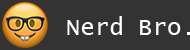
<style>
.page{position:relative;width:190px;height:50px;background:#333333}
.page>*{position:absolute;margin:0}
.t1{font:24px "LucidaConsole";color:#ffffff}
</style>
<div class="page">
<p class="t1" style="left:67px;top:16px;width:124px;height:19px">Nerd Bro.</p>
</div>
